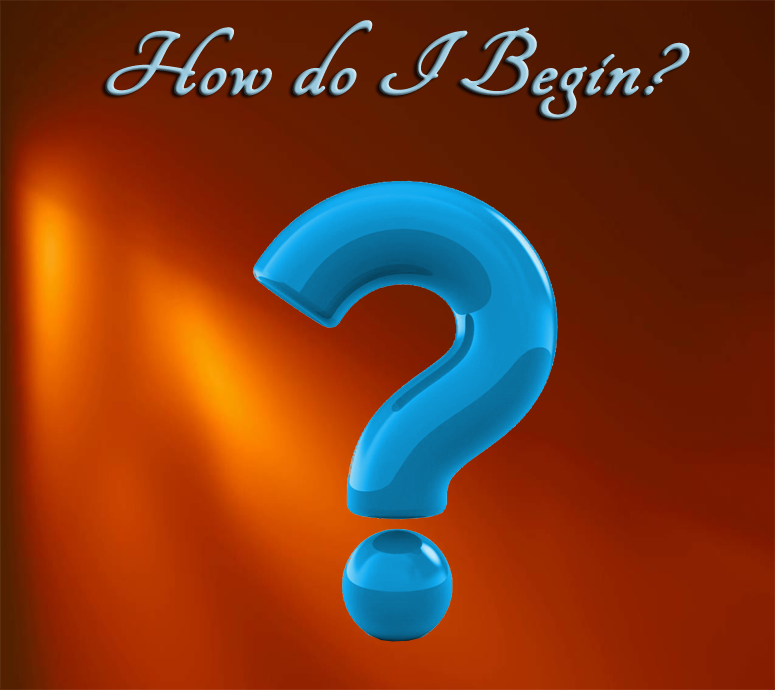
<style>
.page{position:relative;width:775px;height:690px}
.page>*{position:absolute;margin:0}
.t1{font:95.8px "Tangerine-Bold";font-weight:bold;font-style:italic;scale:1.08 1}
</style>
<div class="page">
<p class="t1" style="left:105px;top:20px;width:585px;height:99px">How do I Begin?</p>
</div>
